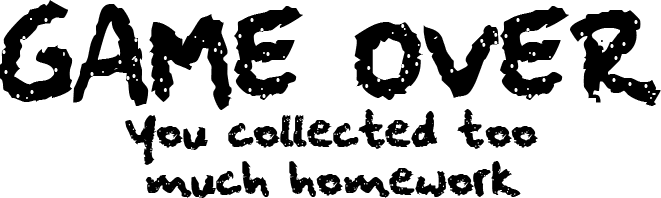
<style>
.page{position:relative;width:661px;height:198px;background:#ffffff}
.page>*{position:absolute;margin:0}
.t1{font:100px "squeakychalksound";color:#000000}
.t2{font:40px "squeakychalksound";color:#000000}
</style>
<div class="page">
<p class="t1" style="left:0px;top:0px;width:661px;height:110px">GAME OVER</p>
<p class="t2" style="left:125px;top:109px;width:413px;height:89px">You collected too<br> much homework</p>
</div>
